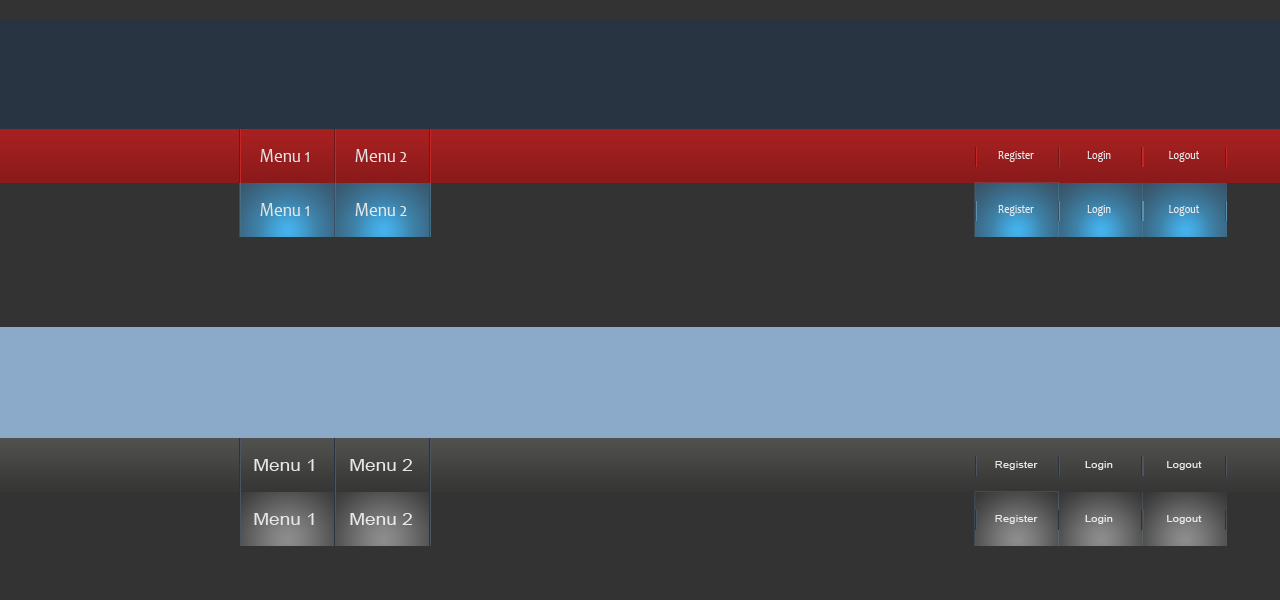
<style>
.page{position:relative;width:1280px;height:600px;background:#333333}
.page>*{position:absolute;margin:0}
.t1{font:20px "Candara";color:#e6e6e6;scale:0.85 1}
.t2{font:12px "Candara";color:#e6e6e6;scale:0.85 1}
.t3{font:20px "Candara";color:#e9e9e9;scale:0.85 1}
.t4{font:12px "Candara";color:#e9e9e9;scale:0.85 1}
.t5{font:15.6px "ArialMT";color:#e6e6e6;scale:1.22 1}
.t6{font:9.4px "ArialMT";color:#e6e6e6;scale:1.22 1}
.t7{font:15.6px "ArialMT";color:#e9e9e9;scale:1.22 1}
.t8{font:9.4px "ArialMT";color:#e9e9e9;scale:1.22 1}
</style>
<div class="page">
<p class="t1" style="left:260px;top:149px;width:49px;height:13px">Menu 1</p>
<p class="t1" style="left:355px;top:149px;width:52px;height:13px">Menu 2</p>
<p class="t2" style="left:998px;top:151px;width:36px;height:11px">Register</p>
<p class="t2" style="left:1087px;top:151px;width:24px;height:11px">Login</p>
<p class="t2" style="left:1169px;top:151px;width:31px;height:11px">Logout</p>
<p class="t1" style="left:260px;top:203px;width:49px;height:13px">Menu 1</p>
<p class="t3" style="left:355px;top:203px;width:52px;height:13px">Menu 2</p>
<p class="t2" style="left:998px;top:205px;width:36px;height:11px">Register</p>
<p class="t4" style="left:1087px;top:205px;width:24px;height:11px">Login</p>
<p class="t4" style="left:1169px;top:205px;width:31px;height:11px">Logout</p>
<p class="t5" style="left:254px;top:459px;width:60px;height:12px">Menu 1</p>
<p class="t5" style="left:350px;top:459px;width:62px;height:12px">Menu 2</p>
<p class="t6" style="left:995px;top:461px;width:43px;height:9px">Register</p>
<p class="t6" style="left:1085px;top:461px;width:28px;height:9px">Login</p>
<p class="t6" style="left:1167px;top:461px;width:35px;height:9px">Logout</p>
<p class="t5" style="left:254px;top:513px;width:60px;height:12px">Menu 1</p>
<p class="t7" style="left:350px;top:513px;width:62px;height:12px">Menu 2</p>
<p class="t6" style="left:995px;top:515px;width:43px;height:9px">Register</p>
<p class="t8" style="left:1085px;top:515px;width:28px;height:9px">Login</p>
<p class="t8" style="left:1167px;top:515px;width:35px;height:9px">Logout</p>
</div>
